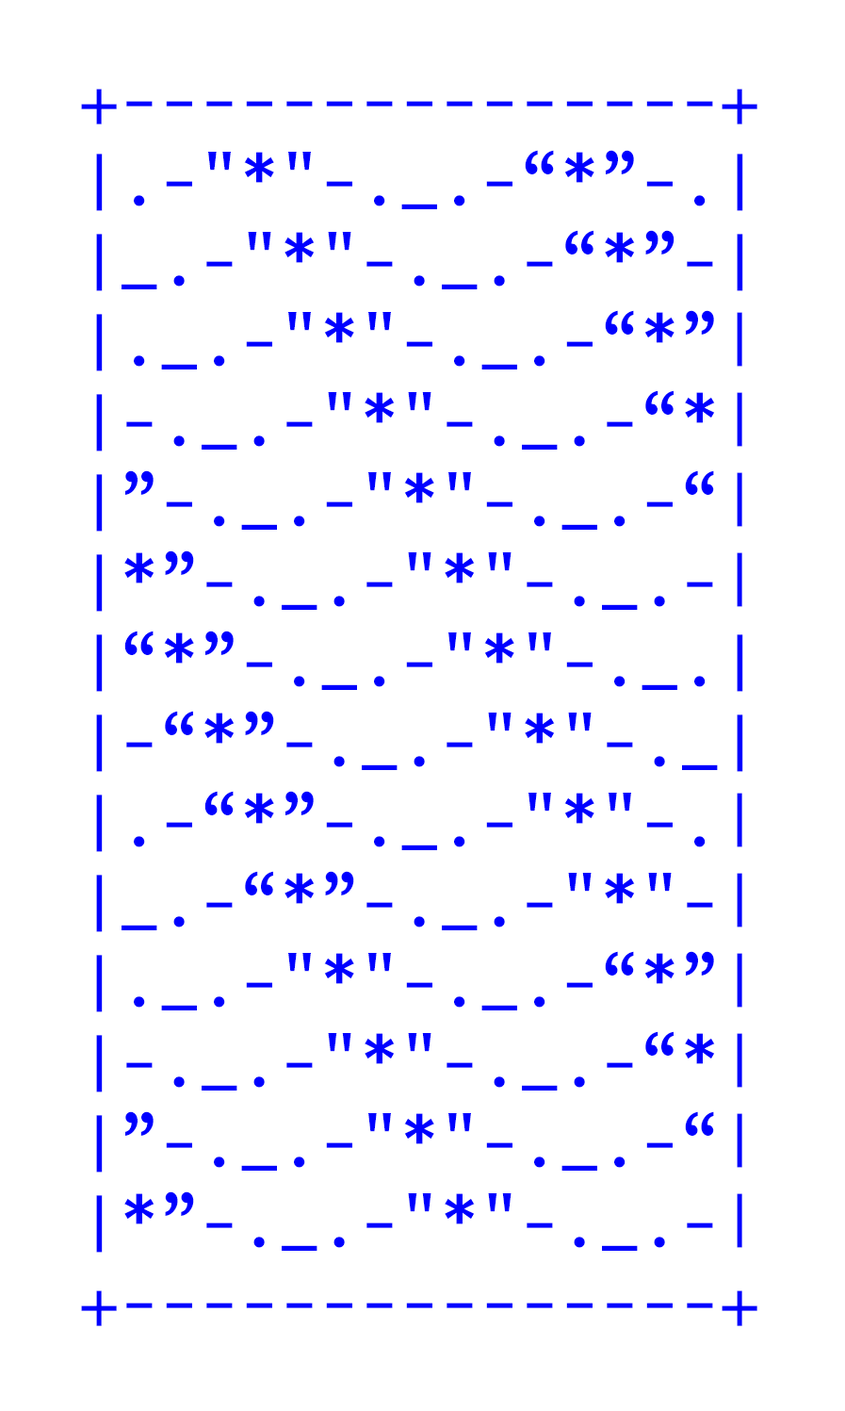
<style>
.page{position:relative;width:845px;height:1411px;background:#ffffff}
.page>*{position:absolute;margin:0}
.t1{font:66.7px "Monaco";color:#0000ff}
</style>
<div class="page">
<p class="t1" style="left:81px;top:89px;width:677px;height:1237px">+---------------+<br>│.-"*"-._.-“*”-.│<br>│_.-"*"-._.-“*”-│<br>│._.-"*"-._.-“*”|<br>│-._.-"*"-._.-“*|<br>│”-._.-"*"-._.-“|<br>│*”-._.-"*"-._.-|<br>│“*”-._.-"*"-._.│<br>│-“*”-._.-"*"-._│<br>│.-“*”-._.-"*"-.|<br>│_.-“*”-._.-"*"-|<br>│._.-"*"-._.-“*”|<br>│-._.-"*"-._.-“*|<br>│”-._.-"*"-._.-“|<br>│*”-._.-"*"-._.-|<br>+---------------+<br><br><br><br><br>├───────────────┤</p>
</div>
